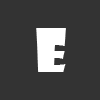
<style>
.page{position:relative;width:100px;height:100px;background:#333333}
.page>*{position:absolute;margin:0}
.t1{font:58.3px "ShowcardGothic-Reg";color:#ffffff}
</style>
<div class="page">
<p class="t1" style="left:36px;top:28px;width:30px;height:44px">e</p>
</div>
